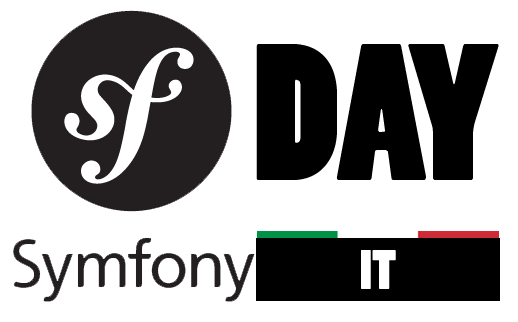
<style>
.page{position:relative;width:518px;height:322px;background:#ffffff}
.page>*{position:absolute;margin:0}
.t1{font:181px "PoplarStd";letter-spacing:-0.005em;color:#000000}
.t2{font:51.2px "PoplarStd";color:#ffffff}
</style>
<div class="page">
<p class="t1" style="left:256px;top:44px;width:243px;height:136px">DAY</p>
<p class="t2" style="left:361px;top:250px;width:35px;height:39px">IT</p>
</div>
